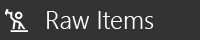
<style>
.page{position:relative;width:200px;height:40px;background:#333333}
.page>*{position:absolute;margin:0}
.t1{font:25px "SegoeUI-Semilight";color:#ffffff}
</style>
<div class="page">
<p class="t1" style="left:47px;top:11px;width:107px;height:18px">Raw Items</p>
</div>
